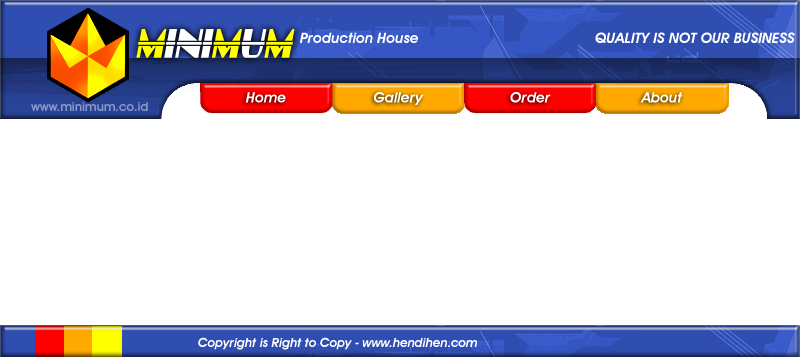
<style>
.page{position:relative;width:800px;height:357px;background:#ffffff}
.page>*{position:absolute;margin:0}
.t1{font:14.5px "AvantGardeITCbyBT-DemiOblique";letter-spacing:-0.005em;color:#ffffff}
.t2{font:12.5px "AvantGardeITCbyBT-Demi";color:#8a98c6}
.t3{font:12.5px "AvantGardeITCbyBT-DemiOblique";letter-spacing:-0.005em;color:#ffffff}
</style>
<div class="page">
<p class="t1" style="left:299px;top:32px;width:119px;height:11px">Production House</p>
<p class="t1" style="left:595px;top:32px;width:200px;height:11px">QUALITY IS NOT OUR BUSINESS</p>
<p class="t2" style="left:31px;top:102px;width:117px;height:9px">www.minimum.co.id</p>
<p class="t1" style="left:245px;top:92px;width:438px;height:13px">Home                     Gallery                     Order                      About</p>
<p class="t3" style="left:198px;top:337px;width:279px;height:13px">Copyright is Right to Copy - www.hendihen.com</p>
</div>
